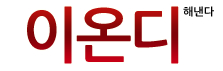
<style>
.page{position:relative;width:223px;height:71px;background:#ffffff}
.page>*{position:absolute;margin:0}
.t1{font:60px "NanumGothicBold";letter-spacing:-0.05em}
.t2{font:11px "NanumGothicBold";color:#000000}
</style>
<div class="page">
<p class="t1" style="left:27px;top:6px;width:152px;height:58px">이온디</p>
<p class="t2" style="left:183px;top:6px;width:31px;height:11px">해낸다</p>
</div>
